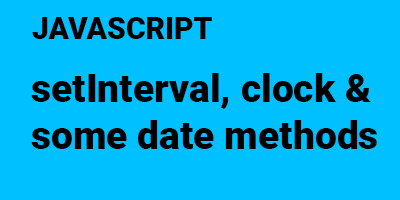
<style>
.page{position:relative;width:400px;height:200px;background:#00c0ff}
.page>*{position:absolute;margin:0}
.t1{font:30px "Roboto-Black";color:#000000}
.t2{font:39px "Roboto-Black";color:#000000}
</style>
<div class="page">
<p class="t1" style="left:32px;top:17px;width:180px;height:22px">JAVASCRIPT</p>
<p class="t2" style="left:31px;top:73px;width:346px;height:76px">setInterval, clock &amp;<br>some date methods</p>
</div>
